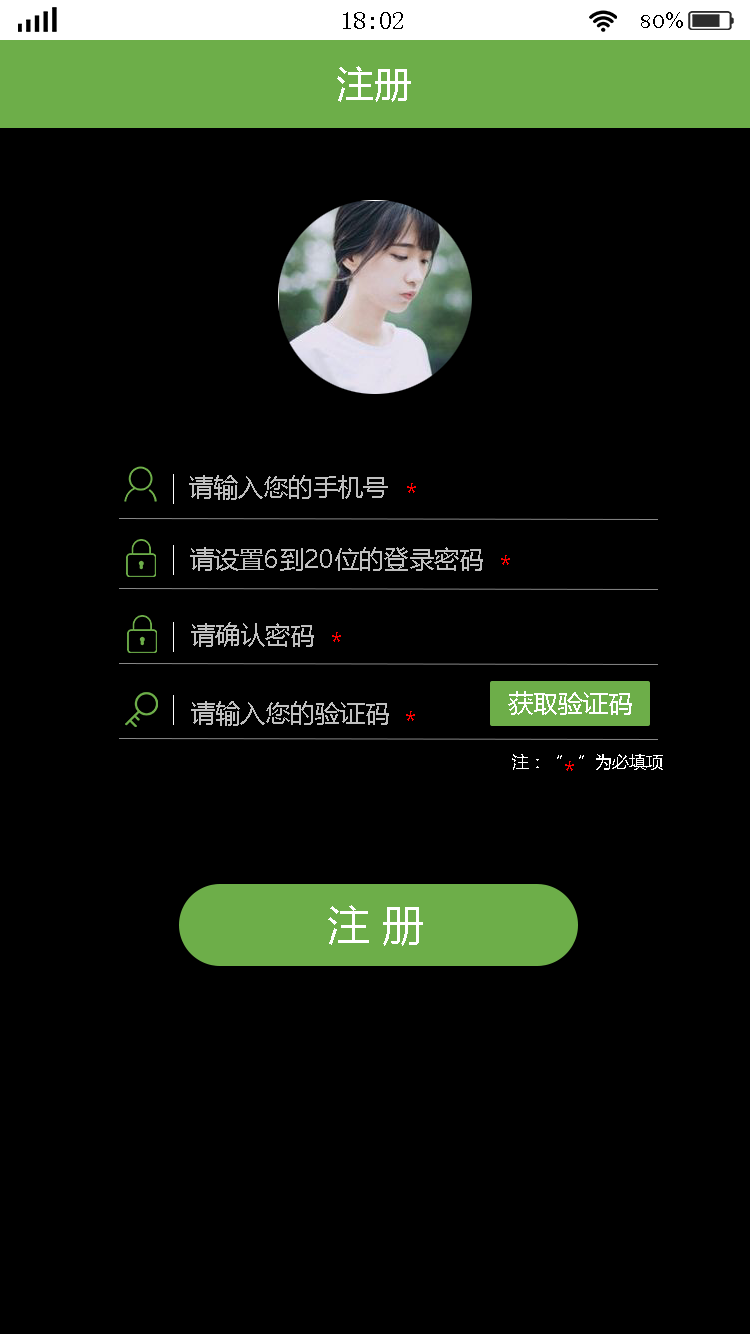
<style>
.page{position:relative;width:750px;height:1334px;background:#000000}
.page>*{position:absolute;margin:0}
.t1{font:25px "SimSun";color:#000000}
.t2{font:25px "BellMT";color:#000000}
.t3{font:37.5px "MicrosoftYaHei";color:#ffffff}
.t4{font:25px "MicrosoftYaHei";color:#bfbfbf}
.t5{font:25px "MicrosoftYaHei";color:#ff0000}
.t6{font:25px "MicrosoftYaHei";color:#ffffff}
.t7{font:16.9px "MicrosoftYaHei";color:#ffffff}
.t8{font:41.7px "MicrosoftYaHei";color:#ffffff}
</style>
<div class="page">
<p class="t1" style="left:343px;top:12px;width:60px;height:17px">18:02</p>
<p class="t2" style="left:641px;top:12px;width:42px;height:16px">80%</p>
<p class="t3" style="left:337px;top:66px;width:74px;height:36px">注册</p>
<p class="t4" style="left:189px;top:475px;width:199px;height:25px">请输入您的手机号</p>
<p class="t5" style="left:407px;top:483px;width:9px;height:10px">*</p>
<p class="t4" style="left:190px;top:547px;width:293px;height:24px">请设置6到20位的登录密码</p>
<p class="t5" style="left:501px;top:555px;width:9px;height:10px">*</p>
<p class="t4" style="left:191px;top:622px;width:123px;height:25px">请确认密码</p>
<p class="t5" style="left:332px;top:632px;width:9px;height:10px">*</p>
<p class="t4" style="left:191px;top:701px;width:198px;height:25px">请输入您的验证码</p>
<p class="t6" style="left:508px;top:691px;width:124px;height:24px">获取验证码</p>
<p class="t5" style="left:406px;top:711px;width:9px;height:10px">*</p>
<p class="t7" style="left:512px;top:754px;width:151px;height:16px">注：“   ”为必填项</p>
<p class="t5" style="left:565px;top:761px;width:9px;height:10px">*</p>
<p class="t8" style="left:328px;top:905px;width:95px;height:41px">注 册</p>
</div>
